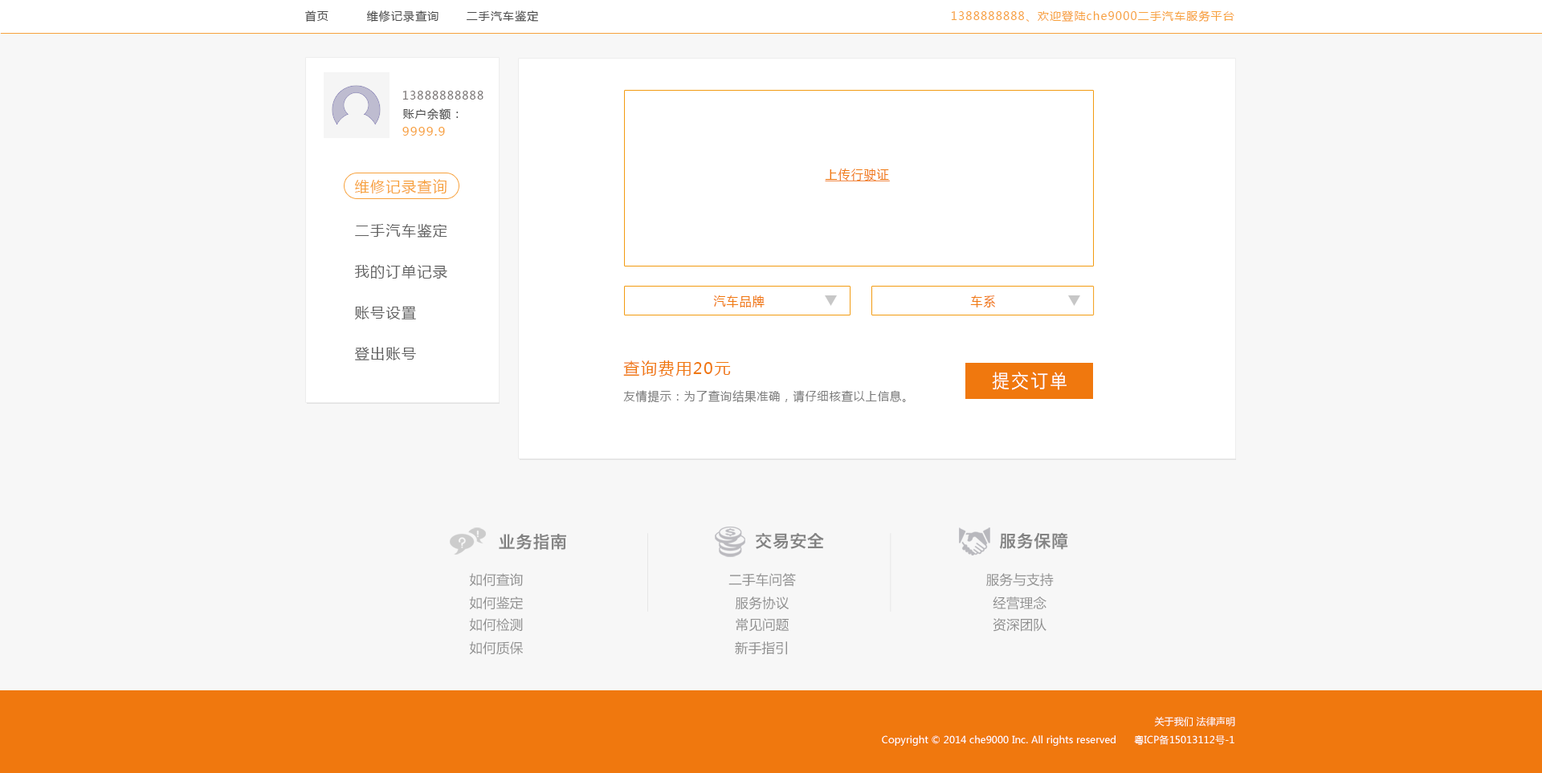
<style>
.page{position:relative;width:1542px;height:773px;background:#f7f7f7}
.page>*{position:absolute;margin:0}
.t1{font:11.2px "MicrosoftYaHei";letter-spacing:0.08em;color:#494949}
.t2{font:11.2px "MicrosoftYaHei";letter-spacing:0.08em;color:#f7a13c}
.t3{font:11.2px "MicrosoftYaHei";letter-spacing:0.08em;color:#787373}
.t4{font:12px "MicrosoftYaHei";letter-spacing:0.08em;color:#f7a13c}
.t5{font:12.8px "MicrosoftYaHei";letter-spacing:0.08em;color:#f0780e;text-decoration:underline;scale:0.93 1}
.t6{font:14.5px "MicrosoftYaHei";letter-spacing:0.08em;color:#f7a13c}
.t7{font:14.5px "MicrosoftYaHei";letter-spacing:0.08em;color:#606060}
.t8{font:12.8px "MicrosoftYaHei";letter-spacing:0.08em;color:#f0780e;scale:0.93 1}
.t9{font:16.1px "MicrosoftYaHei";letter-spacing:0.08em;color:#f0780e}
.t10{font:19.3px "STHeitiSC-Light";letter-spacing:0.08em;color:#ffffff;scale:0.93 1}
.t11{font:12px "MicrosoftYaHei";letter-spacing:0.08em;color:#7c7c7c;scale:0.93 1}
.t12{font:17.1px "HiraginoSansGB-W6";letter-spacing:0.01em;color:#838383}
.t13{font:13.3px "MicrosoftYaHei";letter-spacing:0.01em;color:#909090}
.t14{font:9.6px "MicrosoftYaHei";letter-spacing:0.01em;color:#ffffff}
</style>
<div class="page">
<p class="t1" style="left:305px;top:10px;width:23px;height:12px">首页</p>
<p class="t1" style="left:366px;top:10px;width:72px;height:12px">维修记录查询</p>
<p class="t1" style="left:467px;top:10px;width:71px;height:12px">二手汽车鉴定</p>
<p class="t2" style="left:951px;top:10px;width:283px;height:12px">1388888888、欢迎登陆che9000二手汽车服务平台</p>
<p class="t3" style="left:402px;top:91px;width:81px;height:9px">13888888888</p>
<p class="t1" style="left:402px;top:108px;width:57px;height:12px">账户余额：</p>
<p class="t4" style="left:402px;top:127px;width:43px;height:9px">9999.9</p>
<p class="t5" style="left:825px;top:169px;width:65px;height:12px">上传行驶证</p>
<p class="t6" style="left:355px;top:179px;width:92px;height:15px">维修记录查询</p>
<p class="t7" style="left:355px;top:223px;width:92px;height:15px">二手汽车鉴定</p>
<p class="t7" style="left:354px;top:265px;width:93px;height:14px">我的订单记录</p>
<p class="t7" style="left:355px;top:306px;width:61px;height:14px">账号设置</p>
<p class="t8" style="left:713px;top:296px;width:52px;height:12px">汽车品牌</p>
<p class="t8" style="left:970px;top:296px;width:25px;height:12px">车系</p>
<p class="t7" style="left:355px;top:347px;width:61px;height:14px">登出账号</p>
<p class="t9" style="left:623px;top:361px;width:108px;height:16px">查询费用20元</p>
<p class="t10" style="left:992px;top:372px;width:74px;height:18px">提交订单</p>
<p class="t11" style="left:623px;top:390px;width:283px;height:13px">友情提示：为了查询结果准确，请仔细核查以上信息。</p>
<p class="t12" style="left:756px;top:533px;width:68px;height:16px">交易安全</p>
<p class="t12" style="left:999px;top:532px;width:69px;height:18px">服务保障</p>
<p class="t12" style="left:499px;top:534px;width:67px;height:16px">业务指南</p>
<p class="t13" style="left:469px;top:573px;width:54px;height:14px">如何查询</p>
<p class="t13" style="left:728px;top:573px;width:68px;height:14px">二手车问答</p>
<p class="t13" style="left:986px;top:573px;width:68px;height:14px">服务与支持</p>
<p class="t13" style="left:469px;top:597px;width:54px;height:13px">如何鉴定</p>
<p class="t13" style="left:735px;top:597px;width:54px;height:13px">服务协议</p>
<p class="t13" style="left:993px;top:597px;width:53px;height:13px">经营理念</p>
<p class="t13" style="left:469px;top:618px;width:54px;height:14px">如何检测</p>
<p class="t13" style="left:736px;top:618px;width:53px;height:14px">常见问题</p>
<p class="t13" style="left:993px;top:618px;width:53px;height:14px">资深团队</p>
<p class="t13" style="left:469px;top:642px;width:54px;height:13px">如何质保</p>
<p class="t13" style="left:735px;top:642px;width:52px;height:13px">新手指引</p>
<p class="t14" style="left:1154px;top:717px;width:81px;height:10px">关于我们 法律声明</p>
<p class="t14" style="left:882px;top:735px;width:352px;height:11px">Copyright © 2014 che9000 Inc. All rights reserved      粤ICP备15013112号-1</p>
</div>
